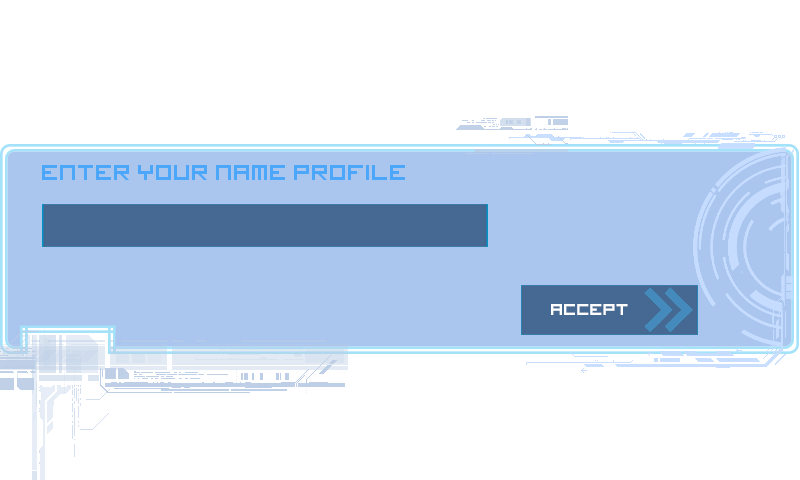
<style>
.page{position:relative;width:800px;height:480px;background:#ffffff}
.page>*{position:absolute;margin:0}
.t1{font:24px "imagine-font";color:#4ca6f9}
</style>
<div class="page">
<p class="t1" style="left:42px;top:165px;width:363px;height:15px">ENTER YOUR NAME PROFILE</p>
</div>
